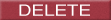
<style>
.page{position:relative;width:111px;height:20px}
.page>*{position:absolute;margin:0}
.t1{font:15.7px "Helvetica";color:#ffffff;scale:1.2 1}
</style>
<div class="page">
<p class="t1" style="left:19px;top:4px;width:71px;height:12px">DELETE</p>
</div>
